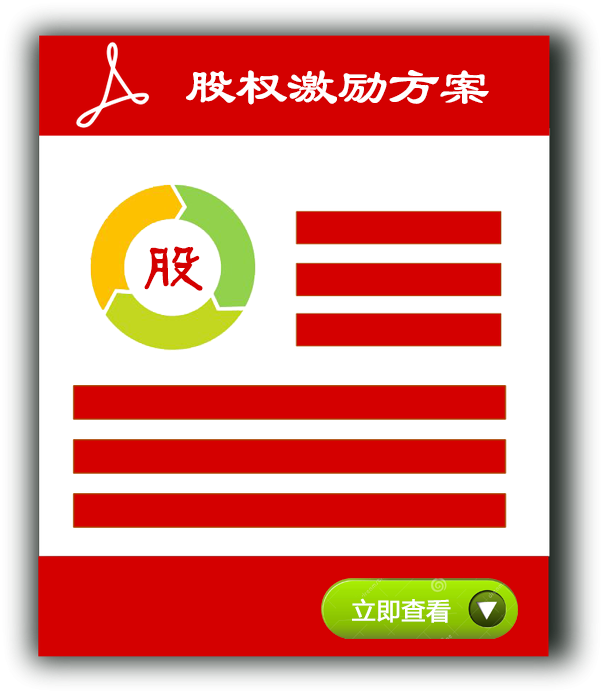
<style>
.page{position:relative;width:605px;height:697px;background:#ffffff}
.page>*{position:absolute;margin:0}
.t1{font:52px "LiSu";letter-spacing:-0.05em;color:#ffffff;font-weight:bold}
.t2{font:60px "FZGLFW--GB1-0";letter-spacing:-0.05em;color:#d40000;font-weight:bold}
.t3{font:24px "MicrosoftYaHei";letter-spacing:0.01em;color:#ffffff;font-weight:bold}
</style>
<div class="page">
<p class="t1" style="left:186px;top:70px;width:303px;height:35px">股权激励方案</p>
<p class="t2" style="left:144px;top:246px;width:59px;height:45px">股</p>
<p class="t3" style="left:352px;top:598px;width:99px;height:25px">立即查看</p>
</div>
